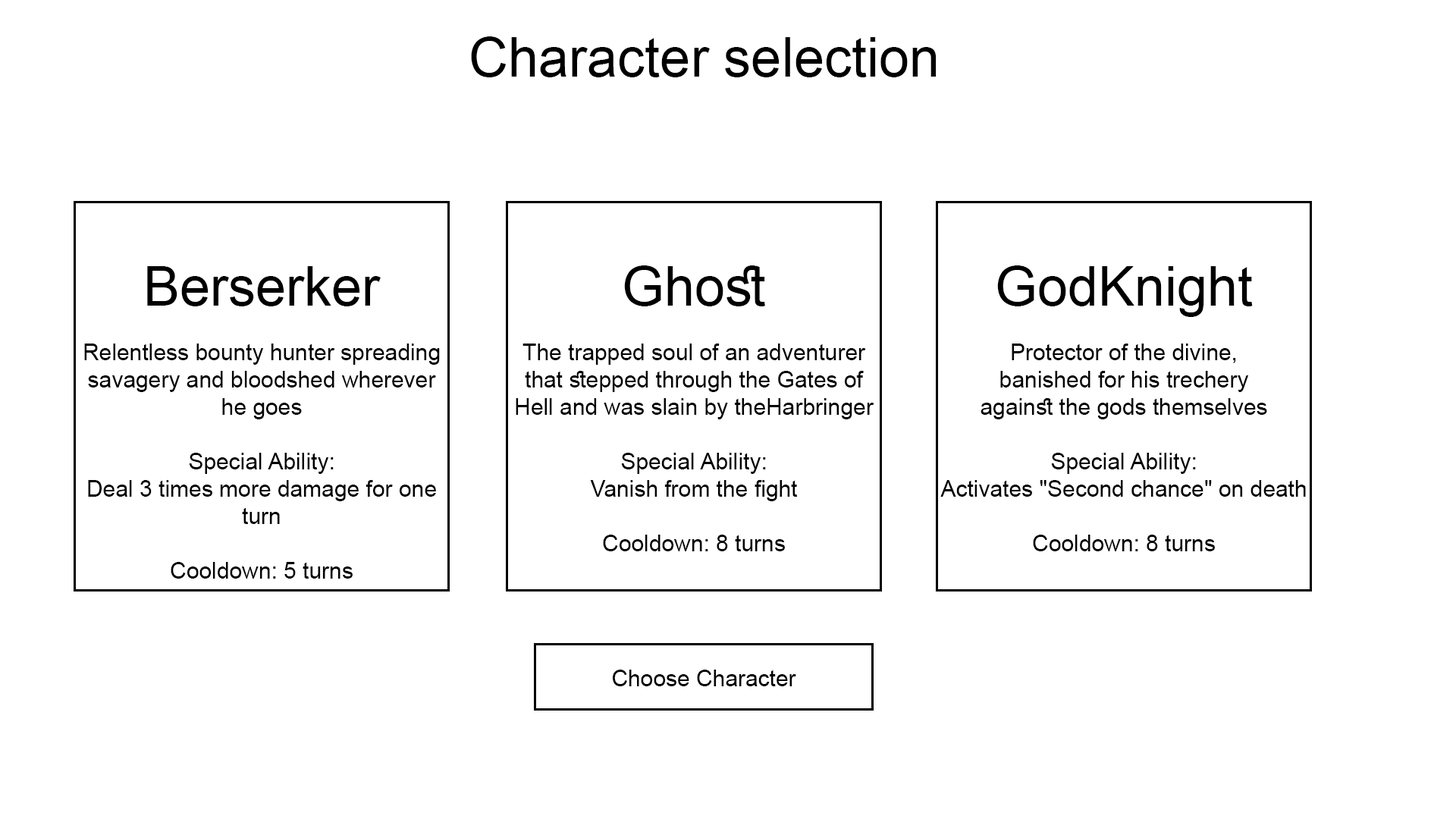
<style>
.page{position:relative;width:1456px;height:819px;background:#ffffff}
.page>*{position:absolute;margin:0}
.t1{font:54.6px "ArialMT";color:#000000}
.t2{font:22.7px "ArialMT";color:#000000}
</style>
<div class="page">
<p class="t1" style="left:471px;top:36px;width:466px;height:41px">Character selection</p>
<p class="t2" style="left:84px;top:266px;width:356px;height:313px;text-align:center"><span class="t1"><br>Berserker<br></span><br>Relentless bounty hunter spreading savagery and bloodshed wherever he goes<br><br>Special Ability:<br>Deal 3 times more damage for one turn<br><br>Cooldown: 5 turns</p>
<p class="t2" style="left:516px;top:265px;width:358px;height:286px;text-align:center"><span class="t1"><br>Ghost<br></span><br>The trapped soul of an adventurer that stepped through the Gates of Hell and was slain by theHarbringer<br><br>Special Ability:<br>Vanish from the fight<br><br>Cooldown: 8 turns</p>
<p class="t2" style="left:940px;top:265px;width:366px;height:286px;text-align:center"><span class="t1"><br>GodKnight<br></span><br>Protector of the divine, <br>banished for his trechery<br>against the gods themselves<br><br>Special Ability:<br>Activates "Second chance" on death<br><br>Cooldown: 8 turns</p>
<p class="t2" style="left:613px;top:670px;width:183px;height:16px">Choose Character</p>
</div>
